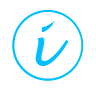
<style>
.page{position:relative;width:96px;height:96px;background:#ffffff}
.page>*{position:absolute;margin:0}
.t1{font:60px "LucidaHandwriting-Italic";color:#00bfff}
</style>
<div class="page">
<p class="t1" style="left:35px;top:21px;width:34px;height:45px">i</p>
</div>
